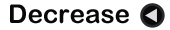
<style>
.page{position:relative;width:170px;height:30px;background:#ffffff}
.page>*{position:absolute;margin:0}
.t1{font:25.9px "ArialRoundedMTBold";color:#090909}
</style>
<div class="page">
<p class="t1" style="left:10px;top:4px;width:119px;height:20px">Decrease</p>
</div>
